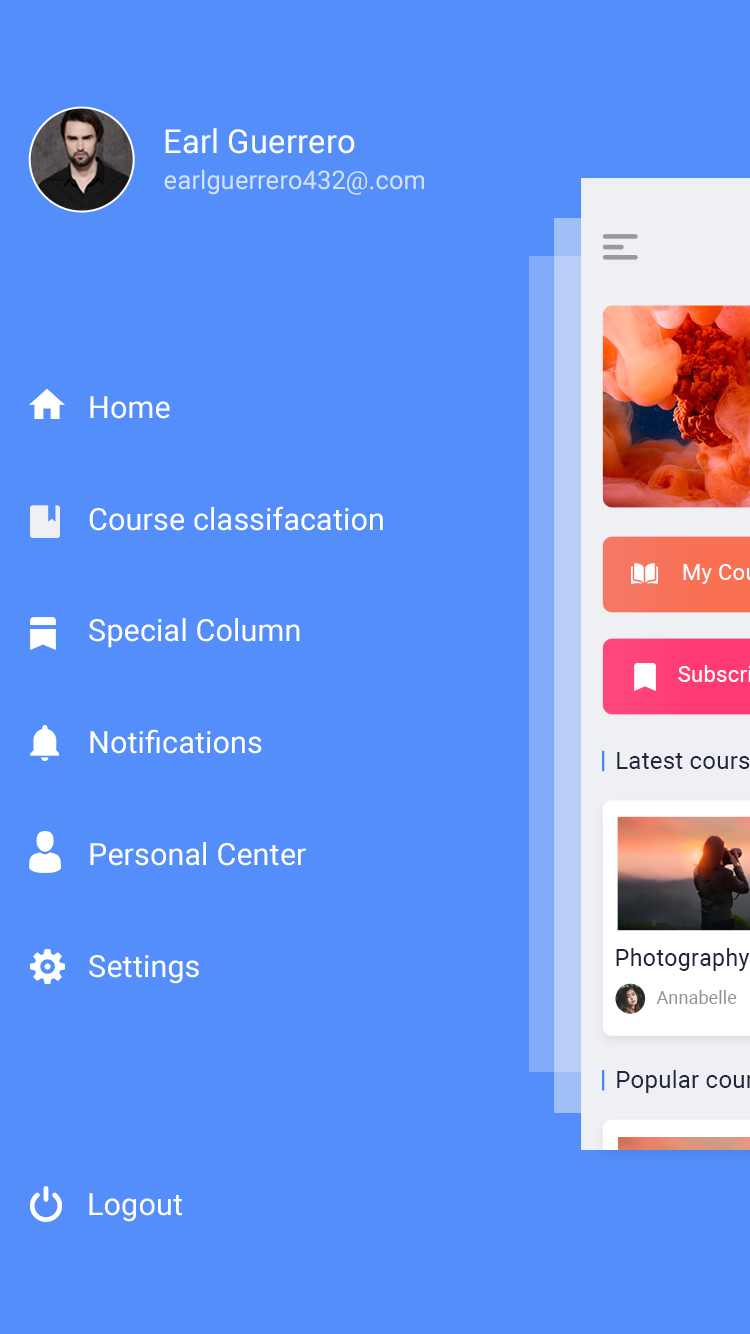
<style>
.page{position:relative;width:750px;height:1334px;background:#538efb}
.page>*{position:absolute;margin:0}
.t1{font:33px "Roboto-Regular";letter-spacing:0.005em;color:#ffffff}
.t2{font:25.4px "Roboto-Regular";letter-spacing:0.005em;color:#d2e1fd}
.t3{font:30.5px/111.8px "Roboto-Regular";letter-spacing:0.005em;color:#ffffff}
.t4{font:18.1px "Roboto-Regular";letter-spacing:0.01em;color:#969393}
.t5{font:30.5px "Roboto-Regular";letter-spacing:0.005em;color:#ffffff}
</style>
<div class="page">
<p class="t1" style="left:165px;top:128px;width:190px;height:26px">Earl Guerrero</p>
<p class="t2" style="left:164px;top:169px;width:260px;height:26px">earlguerrero432@.com</p>
<p class="t3" style="left:89px;top:396px;width:294px;height:588px">Home <br>Course classifacation<br>Special Column<br>Notifications<br>Personal Center<br>Settings</p>
<p class="t4" style="left:656px;top:990px;width:81px;height:14px">Annabelle</p>
<p class="t5" style="left:89px;top:1193px;width:93px;height:29px">Logout</p>
</div>
